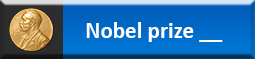
<style>
.page{position:relative;width:255px;height:59px}
.page>*{position:absolute;margin:0}
.t1{font:23px "Calibri-Bold";color:#ffffff}
</style>
<div class="page">
<p class="t1" style="left:86px;top:22px;width:137px;height:20px">Nobel prize __</p>
</div>
